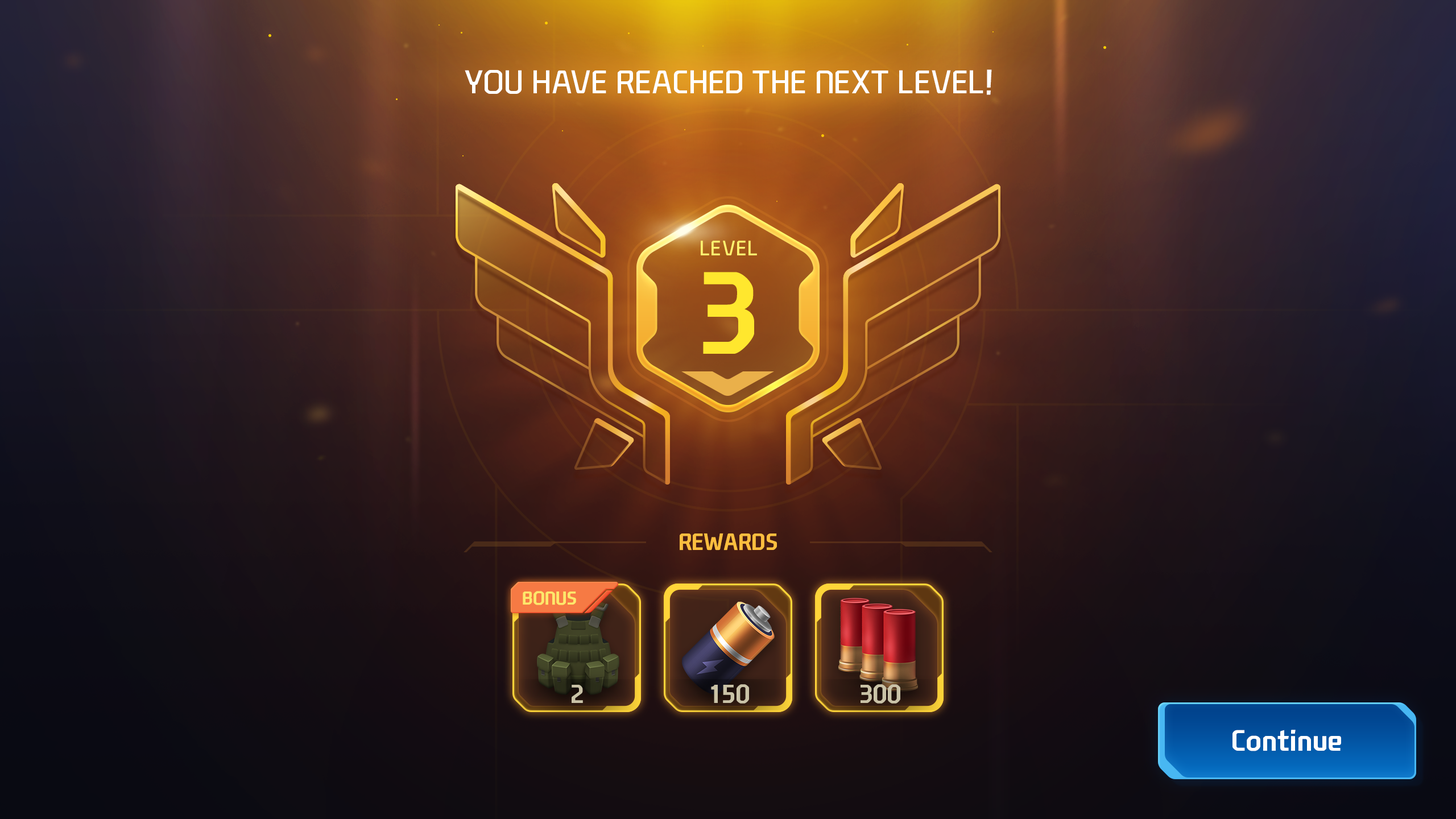
<style>
.page{position:relative;width:1456px;height:819px}
.page>*{position:absolute;margin:0}
.t1{font:31.8px "NEXONFootballGothicL";color:#ffffff;text-transform:uppercase}
.t2{font:20.5px "NEXONFootballGothicL";color:#fff26f;text-transform:uppercase}
.t3{font:112.4px "NEXONFootballGothicB";letter-spacing:-0.02em;color:#ffe72e;text-transform:uppercase}
.t4{font:22.7px "NEXONFootballGothicB";color:#fdbe3f;text-transform:uppercase}
.t5{font:17.9px "NEXONFootballGothicB";color:#fde76b;text-transform:uppercase}
.t6{font:25px "NEXONFootballGothicB";color:#cac3a7;text-transform:uppercase}
.t7{font:28.4px "NEXONFootballGothicB";color:#ffffff}
</style>
<div class="page">
<p class="t1" style="left:465px;top:69px;width:527px;height:26px">You have reached the Next Level!</p>
<p class="t2" style="left:701px;top:241px;width:56px;height:14px">level</p>
<p class="t3" style="left:703px;top:272px;width:51px;height:82px">3</p>
<p class="t4" style="left:680px;top:533px;width:97px;height:18px">Rewards</p>
<p class="t5" style="left:523px;top:591px;width:53px;height:14px">Bonus</p>
<p class="t6" style="left:572px;top:685px;width:11px;height:18px">2</p>
<p class="t6" style="left:711px;top:684px;width:38px;height:20px">150</p>
<p class="t6" style="left:861px;top:684px;width:39px;height:20px">300</p>
<p class="t7" style="left:1232px;top:730px;width:109px;height:21px">Continue</p>
</div>
